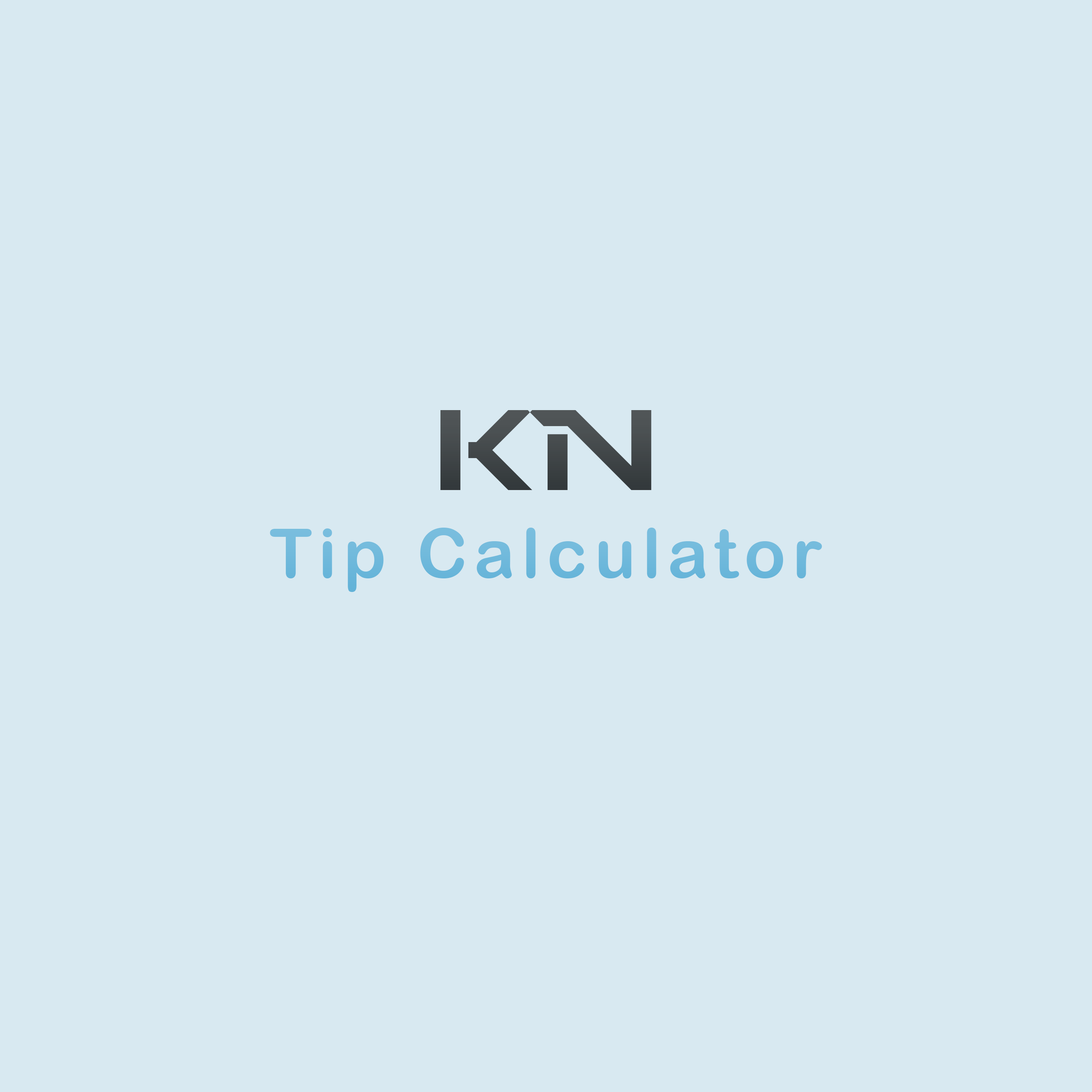
<style>
.page{position:relative;width:1092px;height:1092px;background:#d8e9f1}
.page>*{position:absolute;margin:0}
.t1{font:113.7px "PerfectDarkBRK)";letter-spacing:0.1em;color:#515658}
.t2{font:68.2px "ArialRoundedMTBold";letter-spacing:0.1em;color:#7abede}
</style>
<div class="page">
<p class="t1" style="left:440px;top:410px;width:212px;height:80px">KN</p>
<p class="t2" style="left:270px;top:528px;width:552px;height:64px">Tip Calculator</p>
</div>
